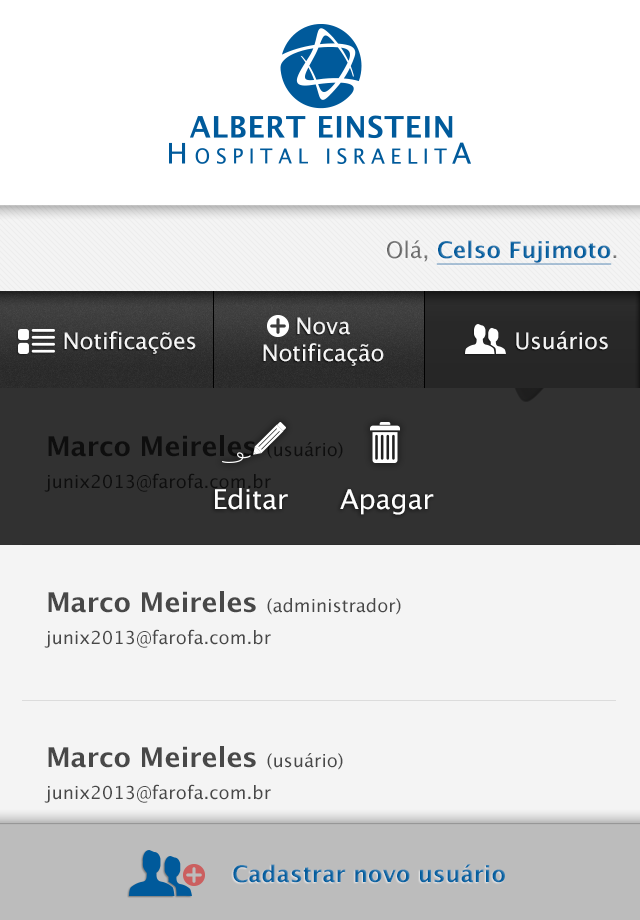
<style>
.page{position:relative;width:640px;height:920px;background:#f4f4f4}
.page>*{position:absolute;margin:0}
.t1{font:22.6px "LucidaGrande-Bold";text-decoration:underline}
.t2{font:22.6px "LucidaGrande"}
.t3{font:22.6px "LucidaGrande";color:#ffffff}
.t4{font:18.1px/31.7px "LucidaGrande";color:#0e0e0e}
.t5{font:27.2px/40.8px "LucidaGrande-Bold";color:#0e0e0e}
.t6{font:27.2px "LucidaGrande";color:#ffffff}
.t7{font:18.1px/31.7px "LucidaGrande";color:#484848}
.t8{font:27.2px/40.8px "LucidaGrande-Bold";color:#484848}
.t9{font:22.6px "LucidaGrande-Bold";color:#1467a3}
</style>
<div class="page">
<p class="t1" style="left:387px;top:240px;width:230px;height:25px"><span class="t2">Olá, </span>Celso Fujimoto<span class="t2">.</span></p>
<p class="t3" style="left:263px;top:317px;width:121px;height:49px;text-align:center">Nova<br>Notificação</p>
<p class="t3" style="left:64px;top:331px;width:132px;height:23px">Notificações</p>
<p class="t3" style="left:516px;top:331px;width:92px;height:19px">Usuários</p>
<p class="t4" style="left:44px;top:435px;width:299px;height:57px"><span class="t5">Marco Meireles </span>(usuário)<br>junix2013@farofa.com.br</p>
<p class="t6" style="left:215px;top:488px;width:219px;height:27px">Editar      Apagar</p>
<p class="t7" style="left:44px;top:591px;width:357px;height:57px"><span class="t8">Marco Meireles </span>(administrador)<br>junix2013@farofa.com.br</p>
<p class="t7" style="left:44px;top:746px;width:299px;height:57px"><span class="t8">Marco Meireles </span>(usuário)<br>junix2013@farofa.com.br</p>
<p class="t9" style="left:233px;top:864px;width:272px;height:19px">Cadastrar novo usuário</p>
</div>
